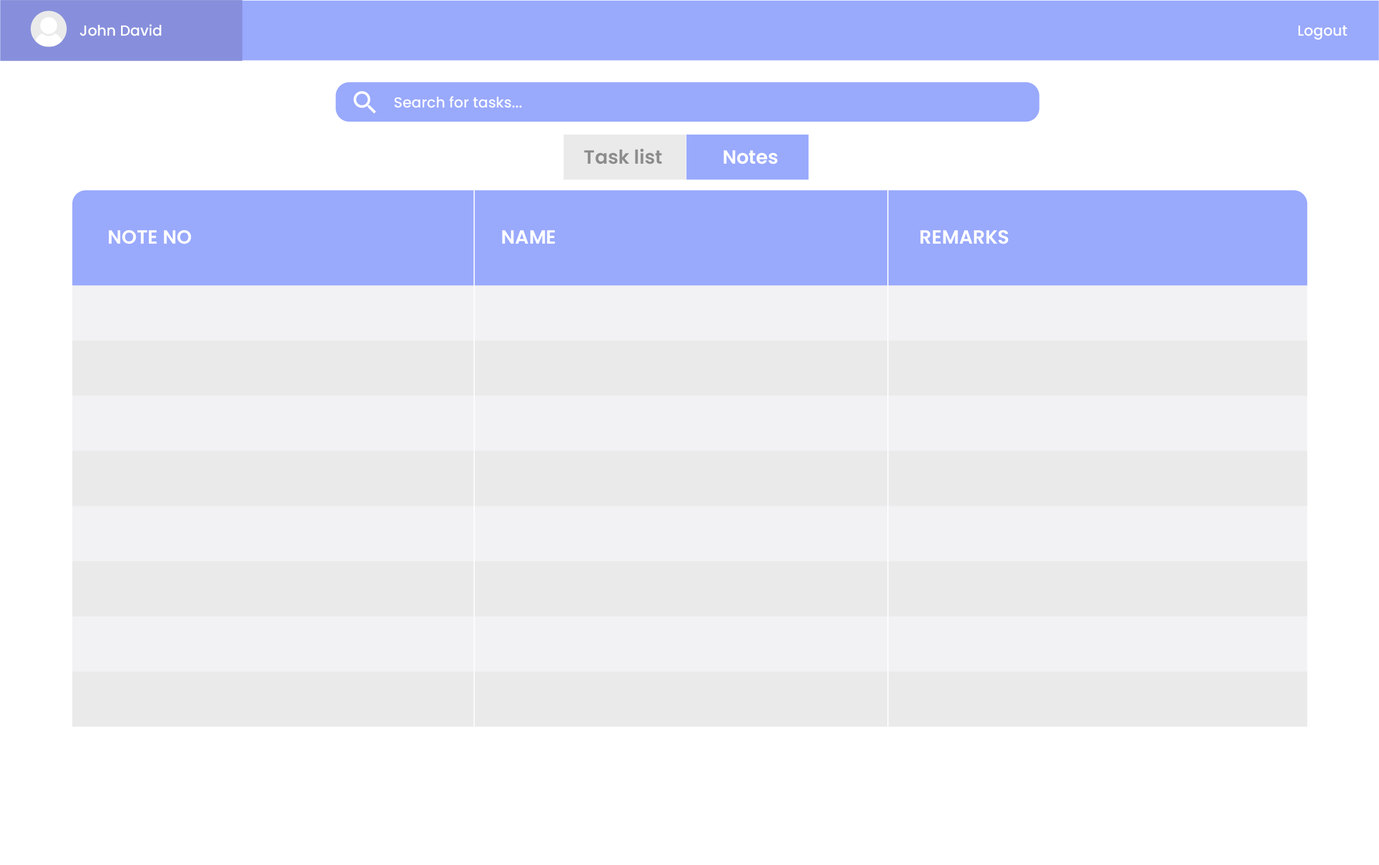
<style>
.page{position:relative;width:1379px;height:865px;background:#ffffff}
.page>*{position:absolute;margin:0}
.t1{font:14.6px "Poppins-Medium";color:#ffffff}
.t2{font:14.6px "Poppins-Medium";color:#fafbff}
.t3{font:19.1px "Poppins-SemiBold";color:#8c8c8c}
.t4{font:19.1px "Poppins-SemiBold";color:#ffffff}
</style>
<div class="page">
<p class="t1" style="left:80px;top:24px;width:82px;height:12px">John David</p>
<p class="t1" style="left:1298px;top:25px;width:49px;height:15px">Logout</p>
<p class="t2" style="left:394px;top:96px;width:128px;height:12px">Search for tasks...</p>
<p class="t3" style="left:584px;top:149px;width:78px;height:15px">Task list</p>
<p class="t4" style="left:723px;top:150px;width:54px;height:14px">Notes</p>
<p class="t4" style="left:109px;top:230px;width:82px;height:14px">NOTE NO</p>
<p class="t4" style="left:502px;top:230px;width:53px;height:14px">NAME</p>
<p class="t4" style="left:920px;top:230px;width:88px;height:14px">REMARKS</p>
</div>
